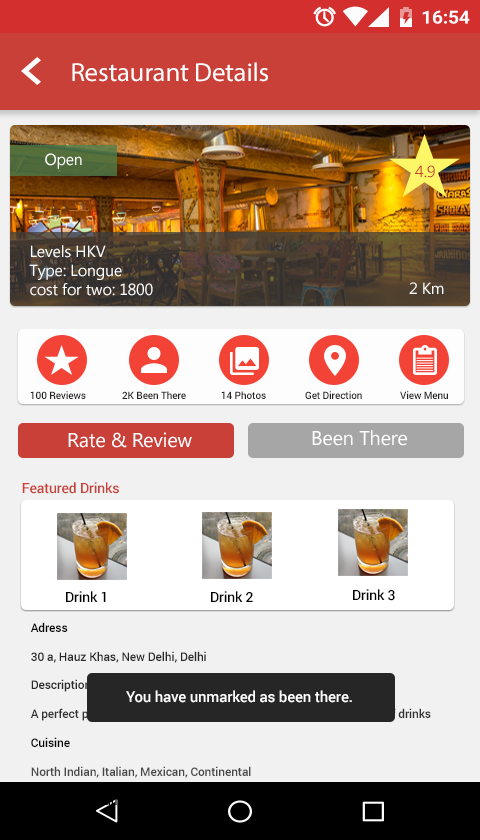
<style>
.page{position:relative;width:480px;height:840px;background:#f1f1f1}
.page>*{position:absolute;margin:0}
.t1{font:26.1px "MyriadPro-Regular";letter-spacing:-0.01em;color:#ffffff;scale:1.03 1}
.t2{font:16px "MicrosoftNewTaiLue";letter-spacing:-0.01em;color:#ffffff}
.t3{font:16px "MicrosoftNewTaiLue";letter-spacing:-0.01em;color:#c94038}
.t4{font:10px "Roboto-Medium";letter-spacing:-0.01em;color:#222222}
.t5{font:20px "Gadugi";letter-spacing:-0.01em;color:#ffffff}
.t6{font:14px "Roboto-Medium";letter-spacing:-0.01em;color:#c94038}
.t7{font:14px "Roboto-Medium";letter-spacing:-0.01em;color:#000000}
.t8{font:12px "Roboto-Medium";letter-spacing:-0.01em;color:#323232}
.t9{font:12px "Roboto-Medium";letter-spacing:-0.01em;color:#000000}
.t10{font:12px "Roboto-Medium";letter-spacing:-0.01em;color:#2a2929}
.t11{font:12px "Roboto-Medium";letter-spacing:-0.01em;color:#484848}
.t12{font:15px "Roboto-Medium";letter-spacing:-0.01em;color:#ffffff}
</style>
<div class="page">
<p class="t1" style="left:72px;top:62px;width:196px;height:20px">Restaurant Details</p>
<p class="t2" style="left:45px;top:153px;width:37px;height:16px">Open</p>
<p class="t3" style="left:415px;top:165px;width:20px;height:13px">4.9</p>
<p class="t2" style="left:29px;top:245px;width:124px;height:51px">Levels HKV<br>Type: Longue <br>cost for two: 1800</p>
<p class="t2" style="left:409px;top:282px;width:35px;height:12px">2 Km</p>
<p class="t4" style="left:30px;top:391px;width:56px;height:8px">100 Reviews</p>
<p class="t4" style="left:122px;top:391px;width:64px;height:8px">2K Been There</p>
<p class="t4" style="left:221px;top:391px;width:45px;height:8px">14 Photos</p>
<p class="t4" style="left:305px;top:391px;width:57px;height:8px">Get Direction</p>
<p class="t4" style="left:400px;top:391px;width:48px;height:8px">View Menu</p>
<p class="t5" style="left:68px;top:432px;width:124px;height:16px">Rate &amp; Review</p>
<p class="t5" style="left:312px;top:430px;width:95px;height:16px">Been There</p>
<p class="t6" style="left:22px;top:482px;width:97px;height:12px">Featured Drinks</p>
<p class="t7" style="left:66px;top:591px;width:40px;height:11px">Drink 1</p>
<p class="t7" style="left:211px;top:591px;width:42px;height:11px">Drink 2</p>
<p class="t7" style="left:353px;top:589px;width:42px;height:12px">Drink 3</p>
<p class="t8" style="left:30px;top:622px;width:401px;height:186px"><span class="t9">Adress<br>     <br></span><span class="t10">30 a, Hauz Khas, New Delhi, Delhi<br><br>Description<br><br></span>A perfect place for enjoying your evening with unmatchable variety of drinks<br><span class="t9"><br>Cuisine<br><br></span><span class="t11">North Indian, Italian, Mexican, Continental<br></span><span class="t9"><br>Hours of Operations</span></p>
<p class="t12" style="left:126px;top:690px;width:226px;height:13px">You have unmarked as been there.</p>
</div>
